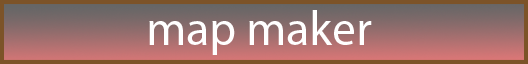
<style>
.page{position:relative;width:528px;height:64px}
.page>*{position:absolute;margin:0}
.t1{font:48px "MyriadPro-Regular";color:#ffffff}
</style>
<div class="page">
<p class="t1" style="left:149px;top:10px;width:223px;height:45px">map maker</p>
</div>
